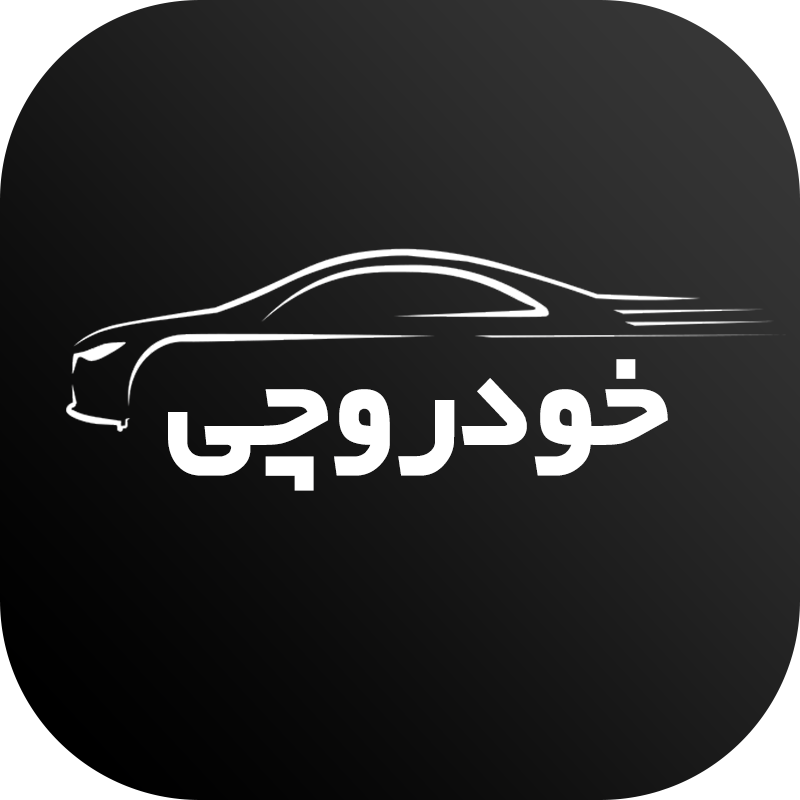
<style>
.page{position:relative;width:800px;height:800px}
.page>*{position:absolute;margin:0}
.t1{font:170px "YEKANPLUS";color:#ffffff}
</style>
<div class="page">
<p class="t1" style="left:168px;top:359px;width:500px;height:132px">خودروچی</p>
</div>
